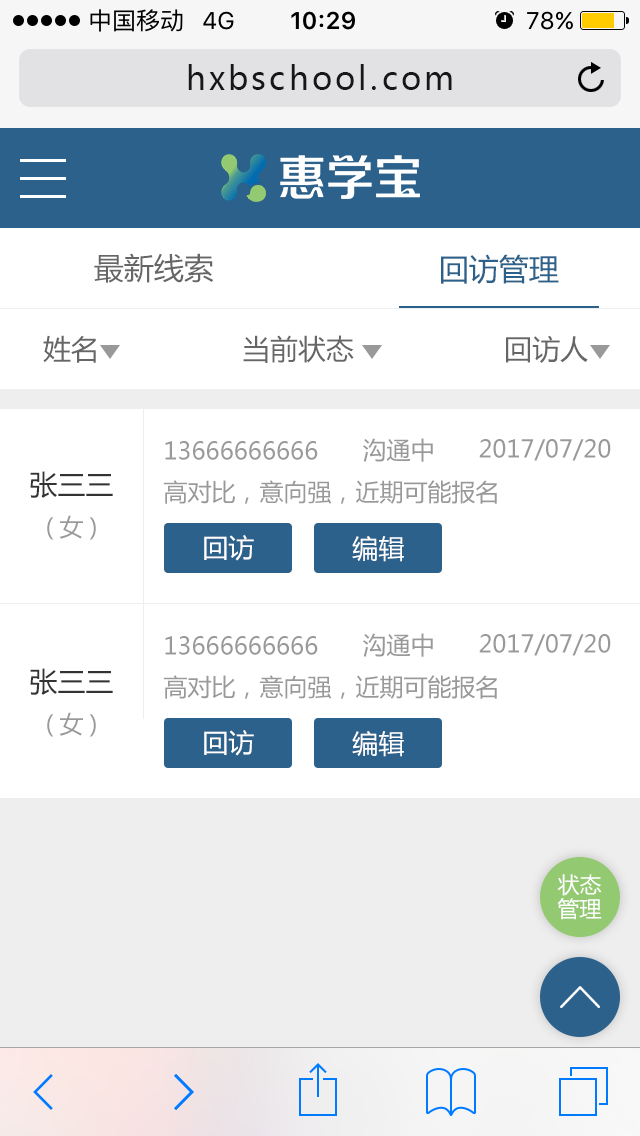
<style>
.page{position:relative;width:640px;height:1136px;background:#ffffff}
.page>*{position:absolute;margin:0}
.t1{font:32px "MicrosoftYaHei";letter-spacing:0.1em;color:#171717}
.t2{font:30px "MicrosoftYaHei";color:#666666}
.t3{font:30px "MicrosoftYaHei";color:#2c618b}
.t4{font:28px "MicrosoftYaHei";color:#666666}
.t5{font:24px "MicrosoftYaHei";color:#999999}
.t6{font:28px "MicrosoftYaHei";color:#333333}
.t7{font:26px "MicrosoftYaHei";color:#ffffff}
.t8{font:22px/24px "MicrosoftYaHei";color:#ffffff}
</style>
<div class="page">
<p class="t1" style="left:188px;top:64px;width:264px;height:26px">hxbschool.com</p>
<p class="t2" style="left:94px;top:253px;width:120px;height:30px">最新线索</p>
<p class="t3" style="left:441px;top:254px;width:118px;height:30px">回访管理</p>
<p class="t4" style="left:43px;top:335px;width:53px;height:28px">姓名</p>
<p class="t4" style="left:243px;top:335px;width:111px;height:28px">当前状态</p>
<p class="t4" style="left:506px;top:335px;width:82px;height:28px">回访人</p>
<p class="t5" style="left:363px;top:438px;width:70px;height:24px">沟通中</p>
<p class="t5" style="left:165px;top:441px;width:153px;height:19px">13666666666</p>
<p class="t5" style="left:479px;top:439px;width:132px;height:22px">2017/07/20</p>
<p class="t6" style="left:30px;top:471px;width:83px;height:27px">张三三</p>
<p class="t5" style="left:163px;top:480px;width:334px;height:24px">高对比，意向强，近期可能报名</p>
<p class="t5" style="left:47px;top:515px;width:49px;height:25px">(女)</p>
<p class="t7" style="left:204px;top:535px;width:50px;height:26px">回访</p>
<p class="t7" style="left:352px;top:536px;width:52px;height:26px">编辑</p>
<p class="t5" style="left:165px;top:636px;width:153px;height:19px">13666666666</p>
<p class="t5" style="left:363px;top:633px;width:70px;height:24px">沟通中</p>
<p class="t5" style="left:479px;top:634px;width:132px;height:22px">2017/07/20</p>
<p class="t6" style="left:30px;top:668px;width:83px;height:27px">张三三</p>
<p class="t5" style="left:163px;top:675px;width:334px;height:24px">高对比，意向强，近期可能报名</p>
<p class="t5" style="left:47px;top:712px;width:49px;height:25px">(女)</p>
<p class="t7" style="left:204px;top:730px;width:50px;height:26px">回访</p>
<p class="t7" style="left:352px;top:731px;width:52px;height:26px">编辑</p>
<p class="t8" style="left:557px;top:874px;width:45px;height:46px">状态<br>管理</p>
</div>
